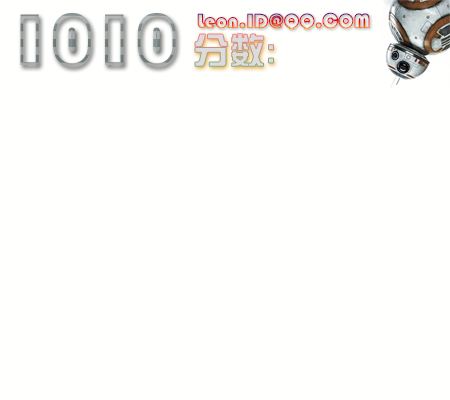
<style>
.page{position:relative;width:450px;height:400px;background:#fffffd}
.page>*{position:absolute;margin:0}
.t1{font:72px "STCaiyun";letter-spacing:0.02em}
.t2{font:20px "STCaiyun";letter-spacing:0.02em}
.t3{font:36px "FZZYJW--GB1-0";letter-spacing:0.02em;color:#dcdcdc}
</style>
<div class="page">
<p class="t1" style="left:20px;top:13px;width:156px;height:54px">1010</p>
<p class="t2" style="left:197px;top:12px;width:173px;height:18px">Leon.ID@QQ.COM</p>
<p class="t3" style="left:195px;top:33px;width:79px;height:34px">分数:</p>
</div>
